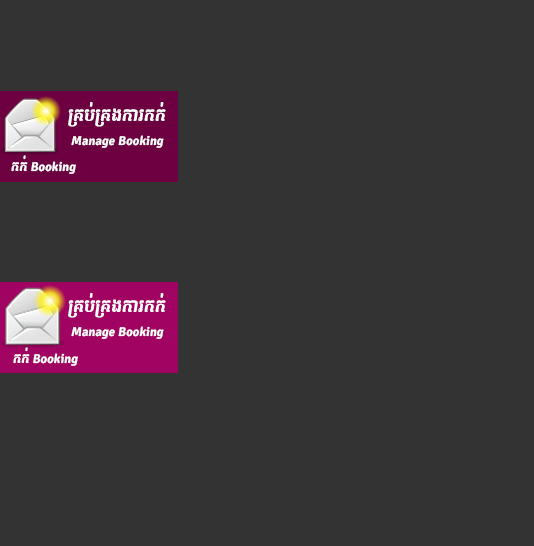
<style>
.page{position:relative;width:534px;height:546px;background:#333333}
.page>*{position:absolute;margin:0}
.t1{font:16px "Romnea-Italic";color:#ffffff}
.t2{font:12px "Romnea-Italic";color:#ffffff}
</style>
<div class="page">
<p class="t1" style="left:68px;top:102px;width:98px;height:25px">គ្រប់​គ្រងការកក់​</p>
<p class="t2" style="left:71px;top:135px;width:93px;height:13px">Manage Booking</p>
<p class="t2" style="left:11px;top:155px;width:65px;height:19px">កក់​ Booking</p>
<p class="t1" style="left:68px;top:293px;width:98px;height:25px">គ្រប់​គ្រងការកក់​</p>
<p class="t2" style="left:71px;top:326px;width:93px;height:13px">Manage Booking</p>
<p class="t2" style="left:13px;top:347px;width:65px;height:19px">កក់​ Booking</p>
</div>
